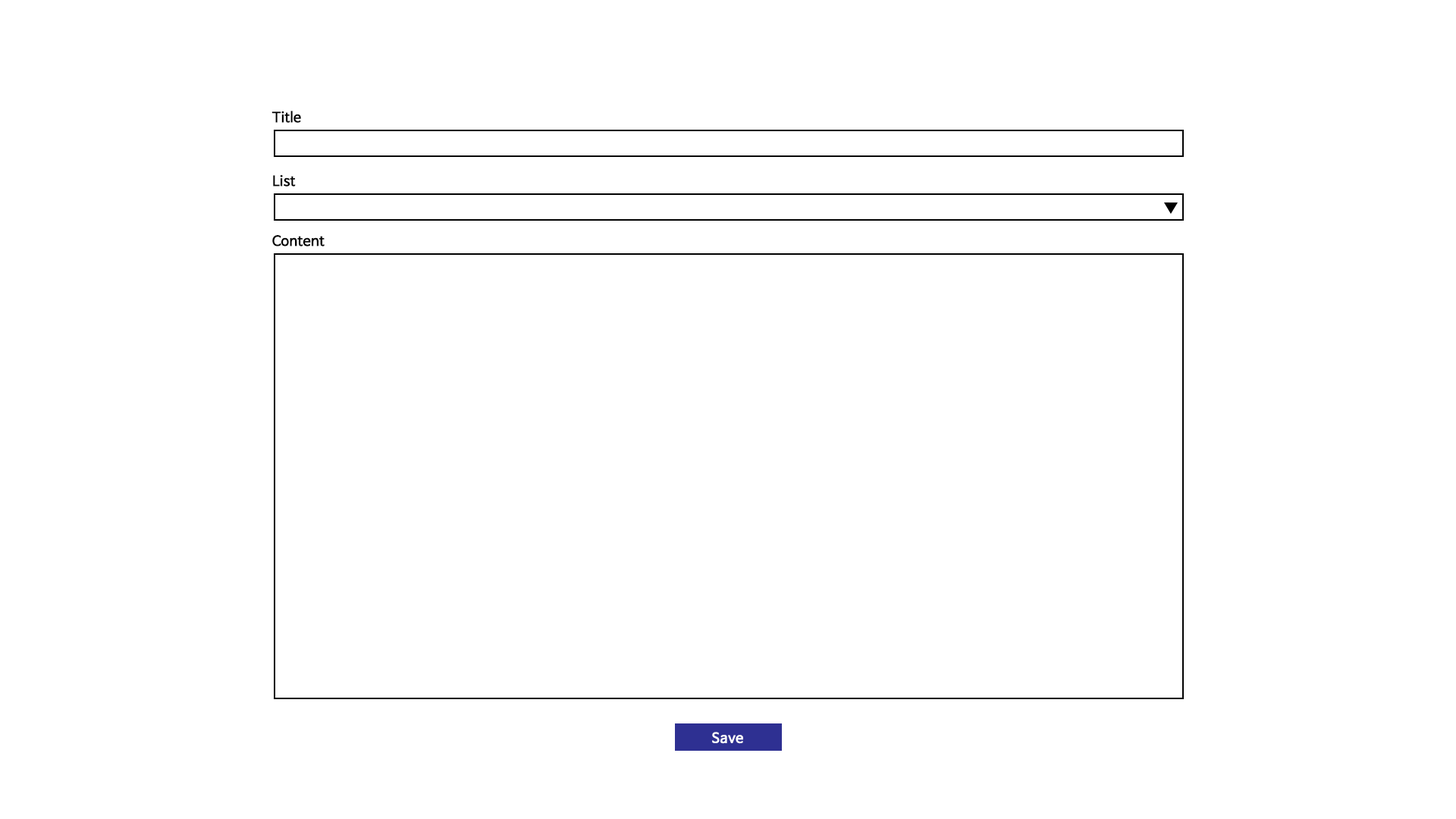
<style>
.page{position:relative;width:1456px;height:819px;background:#ffffff}
.page>*{position:absolute;margin:0}
.t1{font:13.6px "NanumBarunGothic";color:#000000;font-weight:bold}
.t2{font:13.6px "NanumBarunGothic";color:#ffffff;font-weight:bold}
</style>
<div class="page">
<p class="t1" style="left:271px;top:111px;width:30px;height:12px">Title</p>
<p class="t1" style="left:273px;top:174px;width:23px;height:13px">List</p>
<p class="t1" style="left:272px;top:235px;width:53px;height:11px">Content</p>
<p class="t2" style="left:712px;top:732px;width:31px;height:12px">Save</p>
</div>
